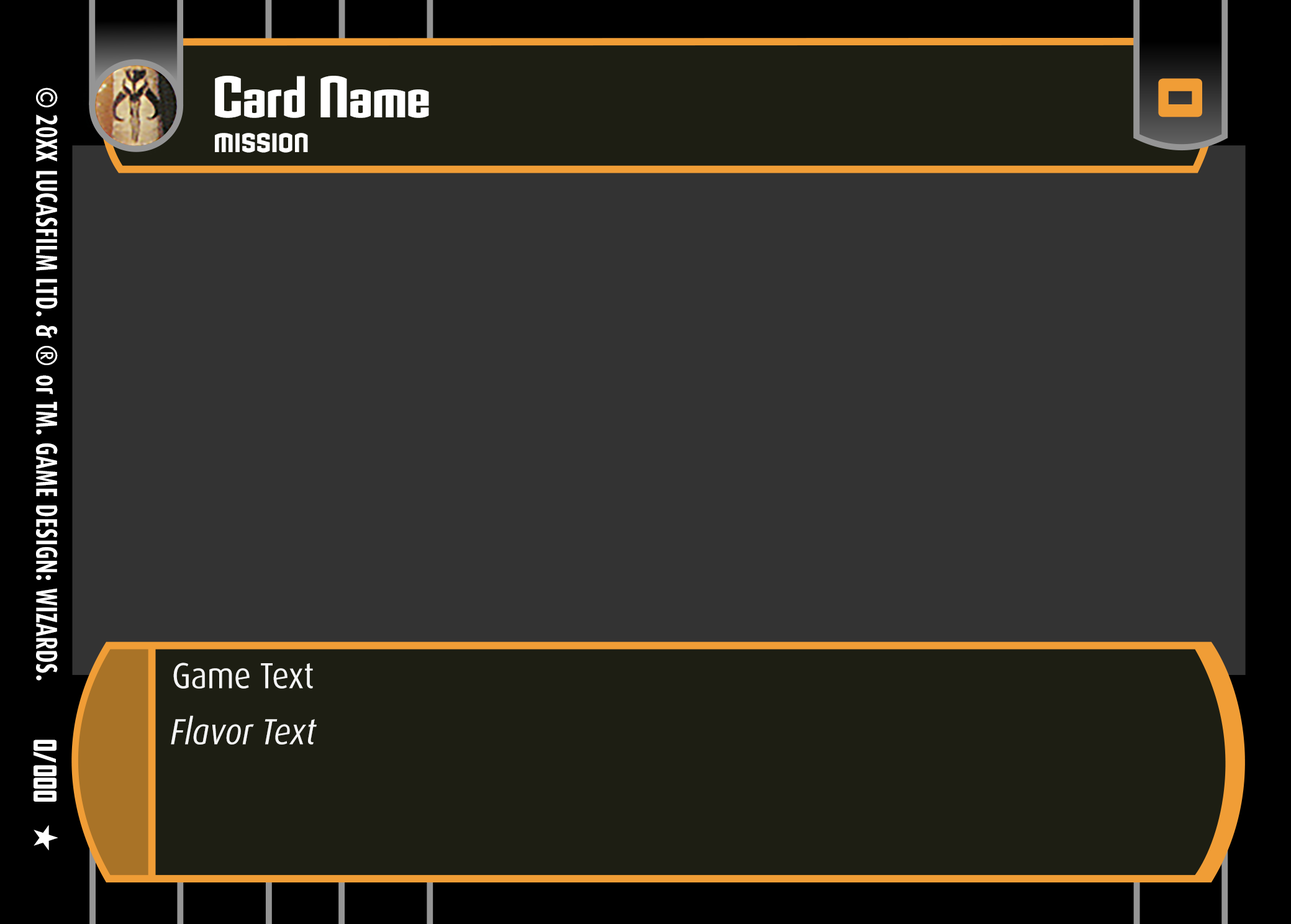
<style>
.page{position:relative;width:1291px;height:924px;background:#333333}
.page>*{position:absolute;margin:0}
.t1{font:57.1px "Armada-BoldCondensed";letter-spacing:0.002em;color:#ffffff}
.t2{font:30.1px "Dax-Bold";letter-spacing:0.02em;color:#ffffff;scale:0.71 1}
.t3{font:30.1px "Dax-Bold";color:#ffffff;scale:0.9 1}
.t4{font:30.1px "Dax-Bold";color:#ffffff;scale:0.71 1}
.t5{font:30.1px "Dax-Bold";letter-spacing:0.02em;color:#ffffff;scale:0.9 1}
.t6{font:30.1px "Dax-Bold";letter-spacing:0.032em;color:#ffffff;scale:0.71 1}
.t7{font:57.1px "AgencyFB-BlackWide";letter-spacing:0.016em;color:#f09d36;text-transform:uppercase}
.t8{font:26.1px "Armada-Bold";letter-spacing:0.02em;color:#ffffff;text-transform:uppercase;scale:0.7 1}
.t9{font:36.2px "Dax-Regular";color:#f4f4f4;scale:0.89 1}
.t10{font:36.2px "Dax-Italic";color:#f4f4f4;scale:0.89 1}
.t11{font:29.5px "AgencyFBBlack";color:#ffffff;scale:0.82 1}
</style>
<div class="page">
<p class="t1" style="left:215px;top:76px;width:214px;height:42px">Card Name</p>
<p class="t2" style="left:36px;top:88px;width:22px;height:592px;rotate:90deg"><span class="t3">©</span><span class="t4"> 20XX </span>LUCASFILM LTD<span class="t5">.</span> &amp; <span class="t5">® </span>or TM<span class="t5">.</span> G<span class="t6">AME DES</span>IGN<span class="t5">:</span> WIZARDS<span class="t5">.</span></p>
<p class="t7" style="left:1158px;top:78px;width:44px;height:39px;rotate:90deg">0</p>
<p class="t8" style="left:215px;top:133px;width:93px;height:20px">Mission</p>
<p class="t9" style="left:173px;top:662px;width:140px;height:27px">Game Text</p>
<p class="t10" style="left:171px;top:715px;width:146px;height:29px">Flavor Text</p>
<p class="t11" style="left:34px;top:739px;width:22px;height:63px;rotate:90deg">0/000</p>
</div>
